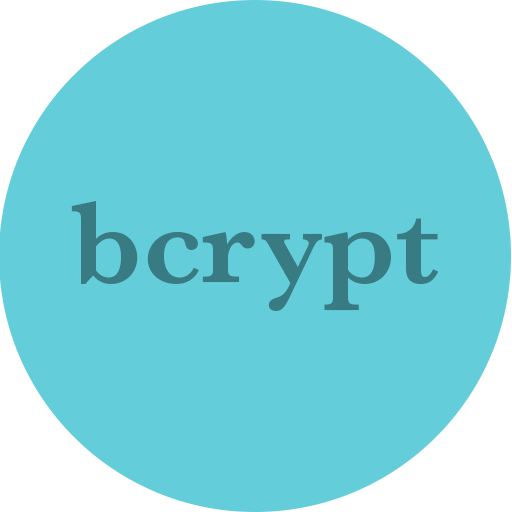
<style>
.page{position:relative;width:512px;height:512px;background:#63cdda}
.page>*{position:absolute;margin:0}
.t1{font:120px "BaskervilleMTStd-SemiBd";color:#397b83}
</style>
<div class="page">
<p class="t1" style="left:71px;top:201px;width:368px;height:110px">bcrypt</p>
</div>
